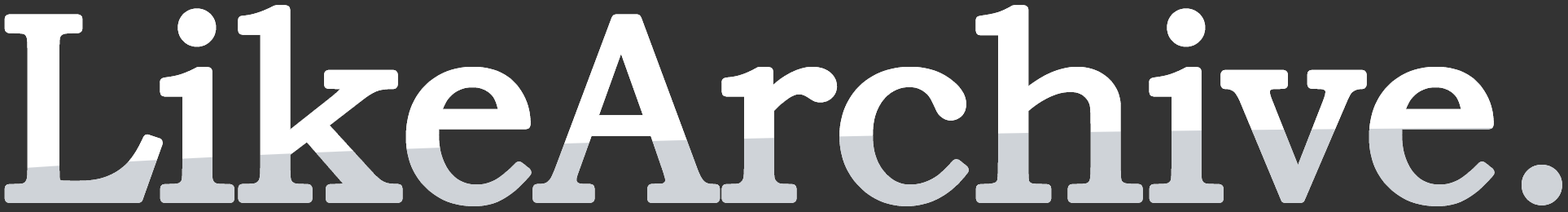
<style>
.page{position:relative;width:1568px;height:212px;background:#333333}
.page>*{position:absolute;margin:0}
.t1{font:264.6px "BookmanOldStyle"}
</style>
<div class="page">
<p class="t1" style="left:8px;top:9px;width:1550px;height:193px">LikeArchive.</p>
</div>
